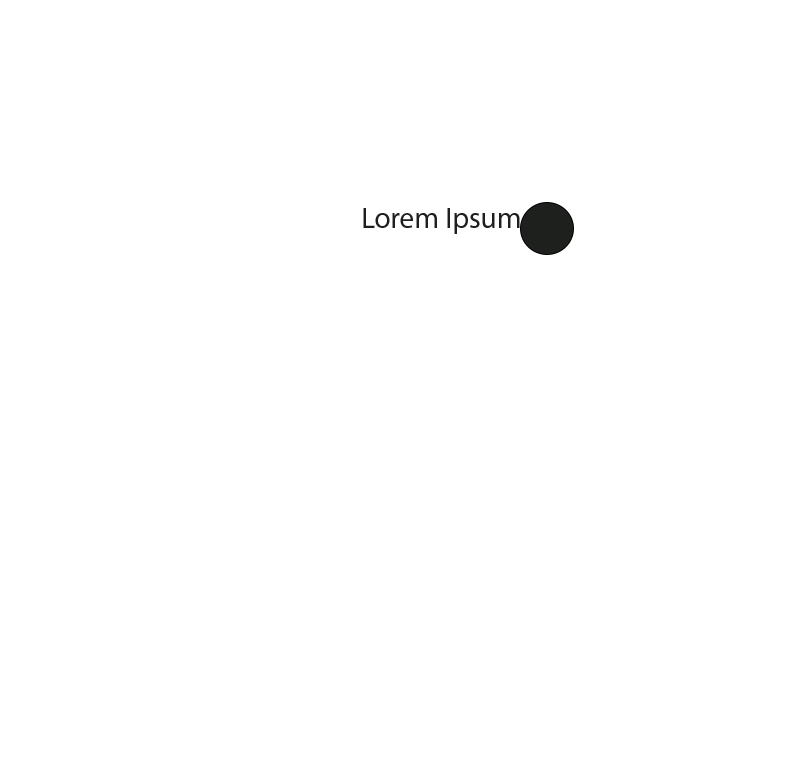
<style>
.page{position:relative;width:794px;height:762px;background:#ffffff}
.page>*{position:absolute;margin:0}
.t1{font:29.3px "MyriadPro-Regular";color:#1e201d}
</style>
<div class="page">
<p class="t1" style="left:363px;top:208px;width:157px;height:26px">Lorem Ipsum</p>
</div>
